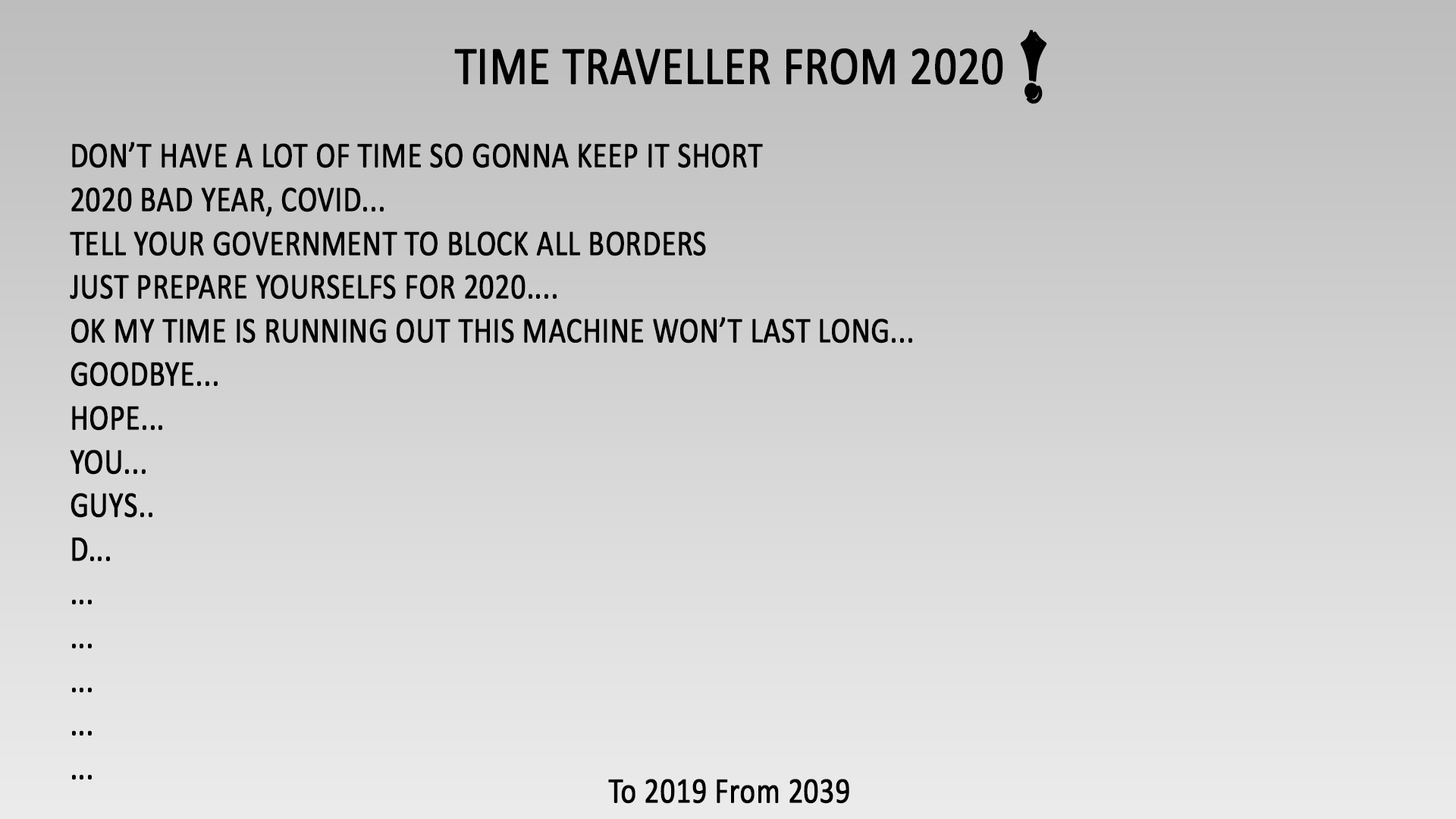
<style>
.page{position:relative;width:1456px;height:819px}
.page>*{position:absolute;margin:0}
.t1{font:109.2px "Algerian";color:#000000;font-weight:bold;scale:0.81 1}
.t2{font:54.6px "Calibri";color:#000000;font-weight:bold;scale:0.81 1}
.t3{font:36.4px "Calibri";color:#000000;font-weight:bold;scale:0.81 1}
</style>
<div class="page">
<p class="t1" style="left:1020px;top:30px;width:27px;height:74px">!</p>
<p class="t2" style="left:454px;top:48px;width:549px;height:37px">TIME TRAVELLER FROM 2020</p>
<p class="t3" style="left:70px;top:142px;width:842px;height:638px">DON’T HAVE A LOT OF TIME SO GONNA KEEP IT SHORT<br>2020 BAD YEAR, COVID...<br>TELL YOUR GOVERNMENT TO BLOCK ALL BORDERS<br>JUST PREPARE YOURSELFS FOR 2020....<br>OK MY TIME IS RUNNING OUT THIS MACHINE WON’T LAST LONG...<br>GOODBYE...<br>HOPE...<br>YOU...<br>GUYS..<br>D...<br>...<br>...<br>...<br>...<br>...</p>
<p class="t3" style="left:608px;top:779px;width:241px;height:25px">To 2019 From 2039</p>
</div>
